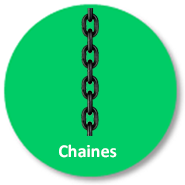
<style>
.page{position:relative;width:185px;height:185px;background:#00cc66}
.page>*{position:absolute;margin:0}
.t1{font:18px "Calibri-Bold";color:#ffffff}
</style>
<div class="page">
<p class="t1" style="left:59px;top:144px;width:58px;height:14px">Chaines</p>
</div>
